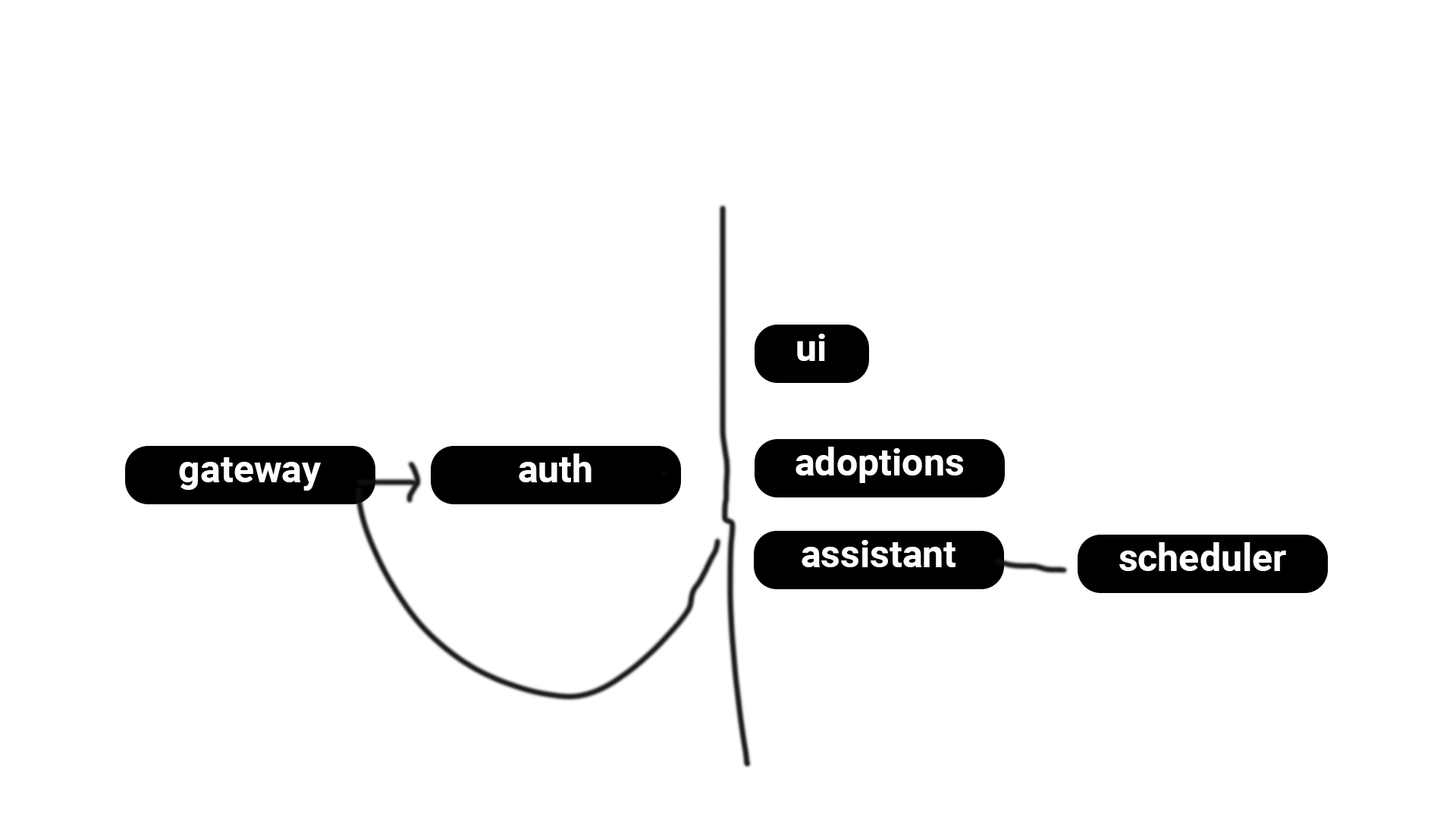
<style>
.page{position:relative;width:1456px;height:819px;background:#ffffff}
.page>*{position:absolute;margin:0}
.t1{font:37.9px "Roboto-Bold";color:#ffffff}
</style>
<div class="page">
<p class="t1" style="left:797px;top:334px;width:28px;height:27px">ui</p>
<p class="t1" style="left:795px;top:447px;width:168px;height:36px">adoptions</p>
<p class="t1" style="left:179px;top:457px;width:142px;height:34px">gateway</p>
<p class="t1" style="left:519px;top:453px;width:72px;height:29px">auth</p>
<p class="t1" style="left:802px;top:540px;width:153px;height:27px">assistant</p>
<p class="t1" style="left:1119px;top:542px;width:167px;height:29px">scheduler</p>
</div>
